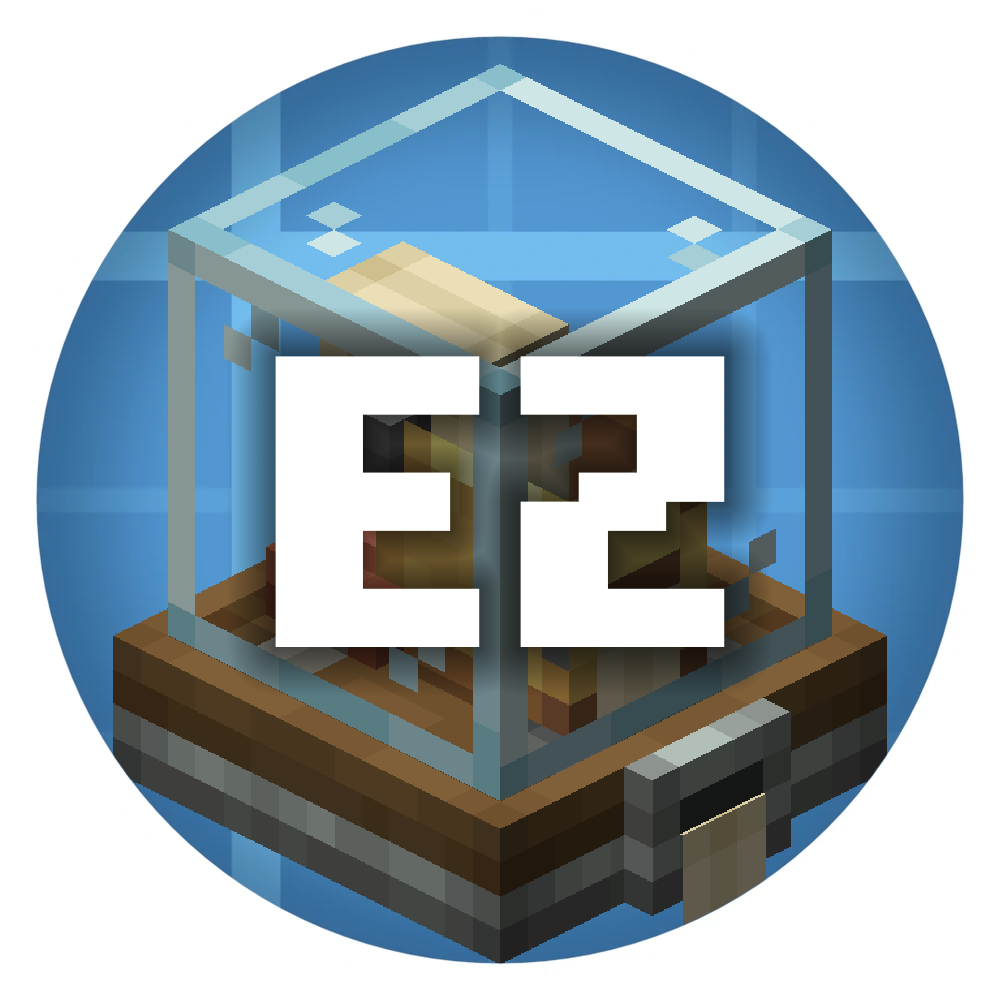
<style>
.page{position:relative;width:1000px;height:1000px;background:#ffffff}
.page>*{position:absolute;margin:0}
.t1{font:415.3px "MinecraftTen";color:#ffffff}
</style>
<div class="page">
<p class="t1" style="left:275px;top:356px;width:450px;height:291px">EZ</p>
</div>
